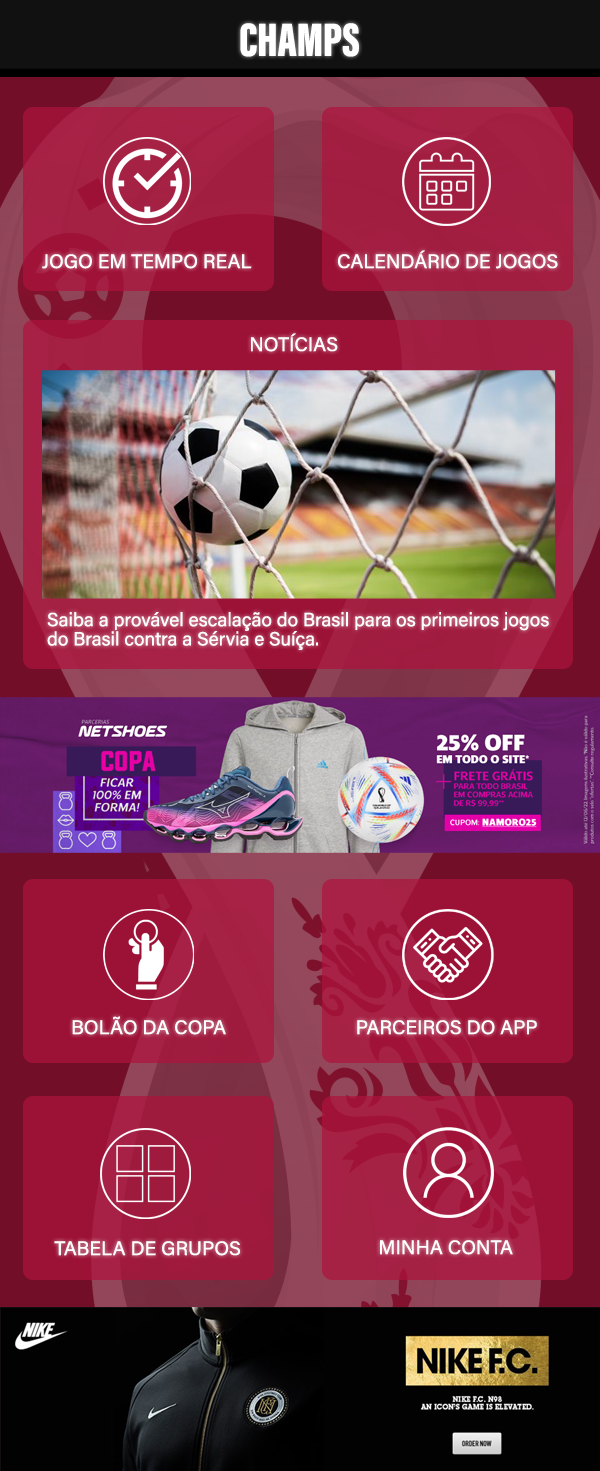
<style>
.page{position:relative;width:600px;height:1471px}
.page>*{position:absolute;margin:0}
.t1{font:48.2px "AcuminConcept-ExtraCondensedBlack";color:#ffffff}
.t2{font:19.5px "AcuminConcept-Regular";color:#ffffff}
.t3{font:19px/19.2px "AcuminConcept-Regular";color:#ffffff}
</style>
<div class="page">
<p class="t1" style="left:240px;top:23px;width:119px;height:34px">CHAMPS</p>
<p class="t2" style="left:42px;top:254px;width:210px;height:15px">JOGO EM TEMPO REAL</p>
<p class="t2" style="left:338px;top:250px;width:220px;height:19px">CALENDÁRIO DE JOGOS</p>
<p class="t2" style="left:251px;top:333px;width:87px;height:19px">NOTÍCIAS</p>
<p class="t3" style="left:47px;top:612px;width:502px;height:38px">Saiba a provável escalação do Brasil para os primeiros jogos <br>do Brasil contra a Sérvia e Suíça.</p>
<p class="t2" style="left:72px;top:1016px;width:154px;height:19px">BOLÃO DA COPA</p>
<p class="t2" style="left:357px;top:1020px;width:180px;height:15px">PARCEIROS DO APP</p>
<p class="t2" style="left:54px;top:1241px;width:186px;height:15px">TABELA DE GRUPOS</p>
<p class="t2" style="left:380px;top:1240px;width:133px;height:15px">MINHA CONTA</p>
</div>
